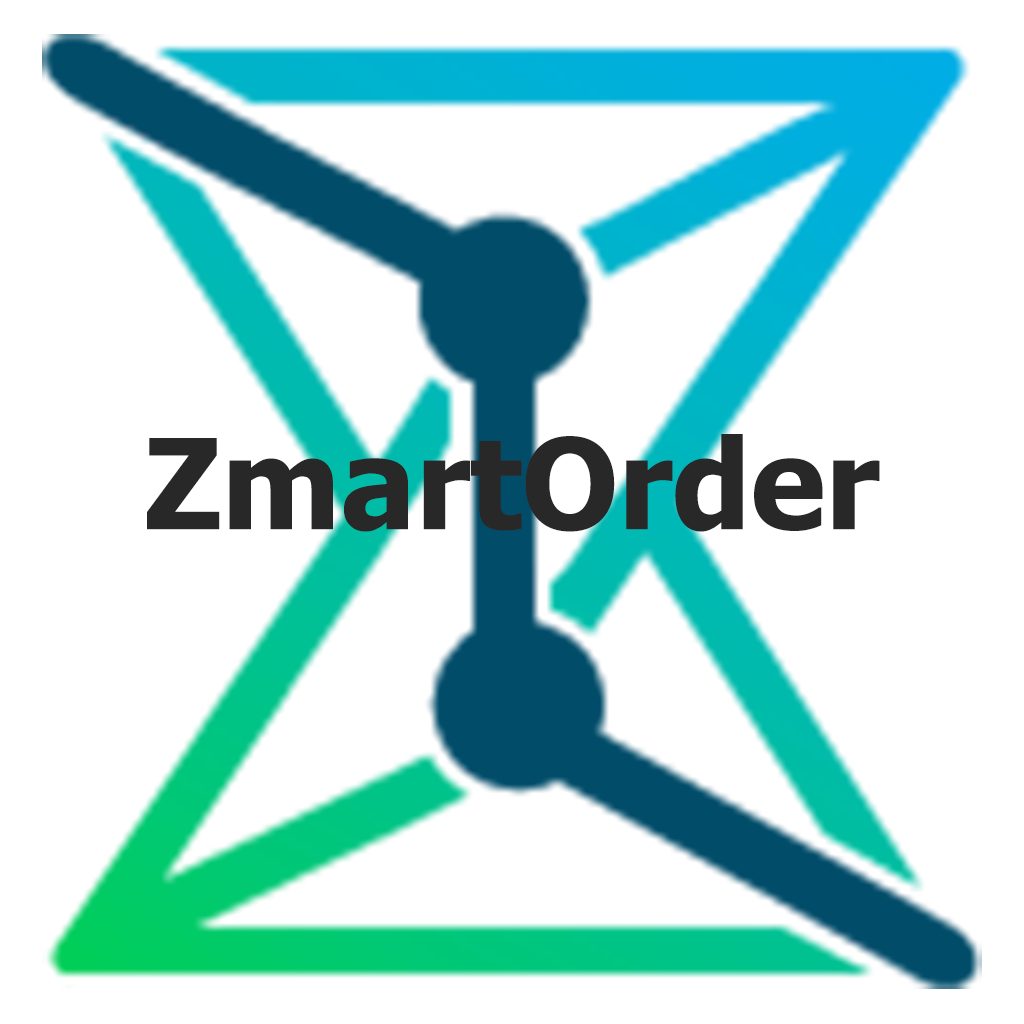
<style>
.page{position:relative;width:1024px;height:1024px;background:#ffffff}
.page>*{position:absolute;margin:0}
.t1{font:125px "Tahoma-Bold";color:#282828}
</style>
<div class="page">
<p class="t1" style="left:147px;top:434px;width:733px;height:98px">ZmartOrder</p>
</div>
